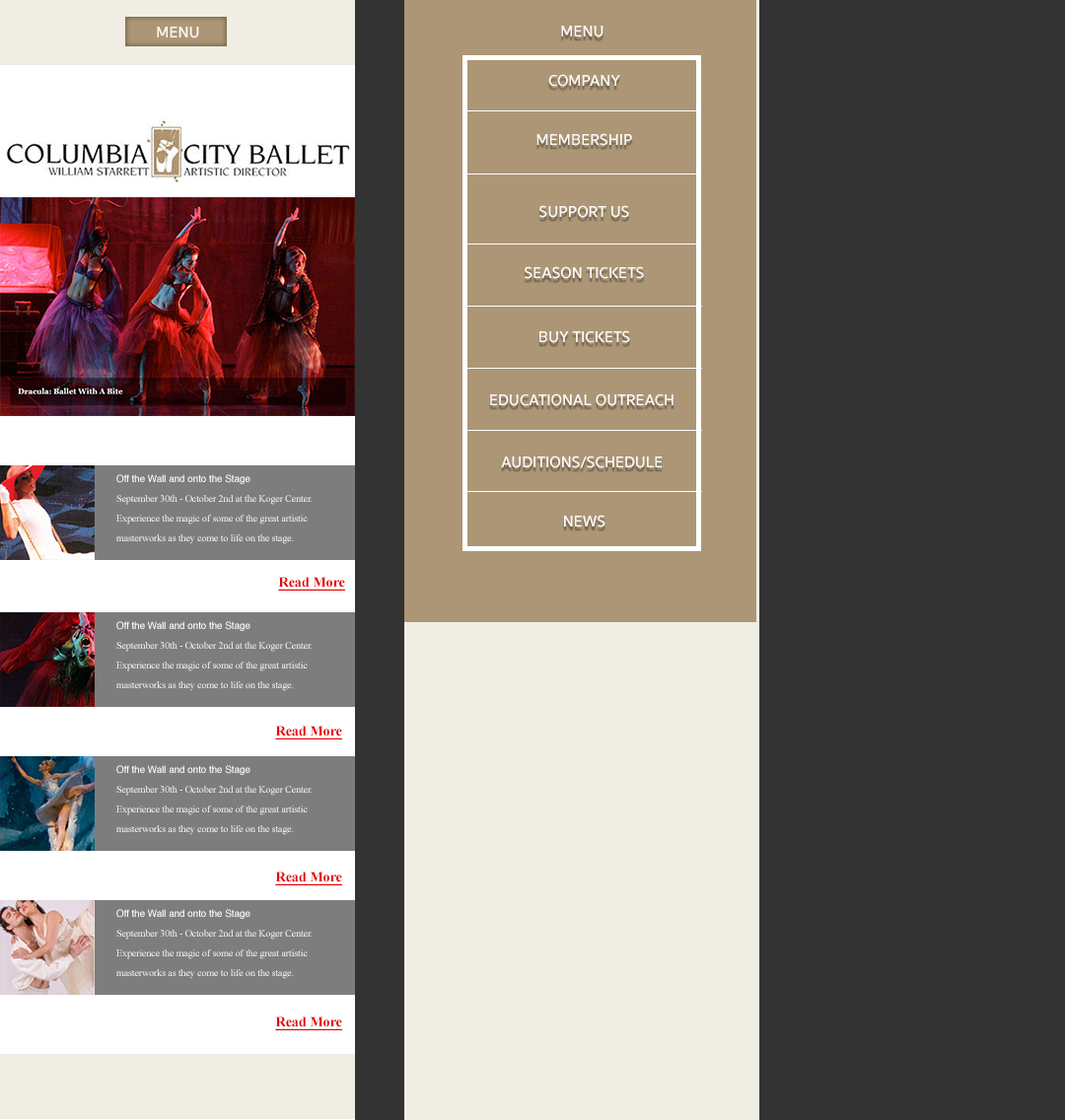
<style>
.page{position:relative;width:1065px;height:1120px;background:#333333}
.page>*{position:absolute;margin:0}
.t1{font:16.2px "SukhumvitSet-SemiBold";color:#fdf9f9}
.t2{font:9.9px/19.7px "TimesNewRomanPSMT";letter-spacing:-0.01em;color:#fcfcfc}
.t3{font:9.9px/19.7px "Helvetica";letter-spacing:-0.01em;color:#fcfcfc}
.t4{font:14.2px "TimesNewRomanPS-BoldMT";letter-spacing:-0.01em;color:#e60000;text-decoration:underline}
</style>
<div class="page">
<p class="t1" style="left:157px;top:27px;width:42px;height:11px">MENU</p>
<p class="t1" style="left:561px;top:26px;width:42px;height:11px">MENU</p>
<p class="t1" style="left:548px;top:74px;width:72px;height:13px">COMPANY</p>
<p class="t1" style="left:536px;top:133px;width:96px;height:13px">MEMBERSHIP</p>
<p class="t1" style="left:539px;top:205px;width:90px;height:13px">SUPPORT US</p>
<p class="t1" style="left:524px;top:266px;width:120px;height:13px">SEASON TICKETS</p>
<p class="t1" style="left:539px;top:330px;width:91px;height:13px">BUY TICKETS</p>
<p class="t1" style="left:490px;top:393px;width:183px;height:13px">EDUCATIONAL OUTREACH</p>
<p class="t1" style="left:501px;top:455px;width:161px;height:13px">AUDITIONS/SCHEDULE</p>
<p class="t2" style="left:116px;top:474px;width:197px;height:70px"><span class="t3">Off the Wall and onto the Stage<br></span>September 30th - October 2nd at the Koger Center. Experience the magic of some of the great artistic masterworks as they come to life on the stage.</p>
<p class="t1" style="left:564px;top:515px;width:41px;height:12px">NEWS</p>
<p class="t4" style="left:278px;top:577px;width:67px;height:14px">Read More</p>
<p class="t2" style="left:116px;top:621px;width:197px;height:70px"><span class="t3">Off the Wall and onto the Stage<br></span>September 30th - October 2nd at the Koger Center. Experience the magic of some of the great artistic masterworks as they come to life on the stage.</p>
<p class="t4" style="left:275px;top:726px;width:67px;height:13px">Read More</p>
<p class="t2" style="left:116px;top:765px;width:197px;height:70px"><span class="t3">Off the Wall and onto the Stage<br></span>September 30th - October 2nd at the Koger Center. Experience the magic of some of the great artistic masterworks as they come to life on the stage.</p>
<p class="t4" style="left:275px;top:872px;width:67px;height:13px">Read More</p>
<p class="t2" style="left:116px;top:909px;width:197px;height:70px"><span class="t3">Off the Wall and onto the Stage<br></span>September 30th - October 2nd at the Koger Center. Experience the magic of some of the great artistic masterworks as they come to life on the stage.</p>
<p class="t4" style="left:275px;top:1016px;width:67px;height:14px">Read More</p>
</div>
